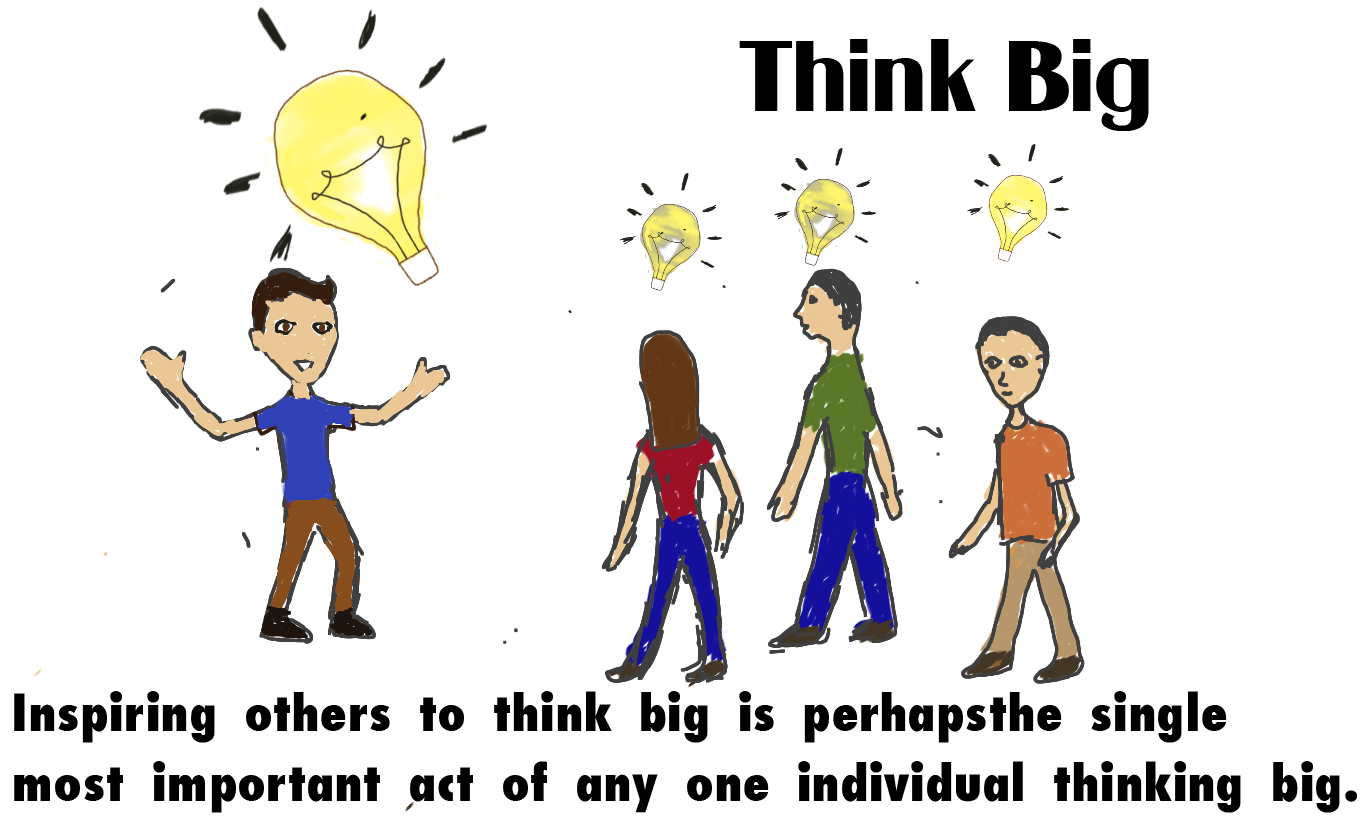
<style>
.page{position:relative;width:1368px;height:829px;background:#ffffff}
.page>*{position:absolute;margin:0}
.t1{font:83.3px "Guanine";color:#000000}
.t2{font:58.3px "Futura-CondensedExtraBold-Th";color:#000000}
</style>
<div class="page">
<p class="t1" style="left:739px;top:39px;width:410px;height:92px">Think Big</p>
<p class="t2" style="left:14px;top:691px;width:1343px;height:122px">Inspiring others to think big is perhapsthe single <br>most important act of any one individual thinking big.</p>
</div>
